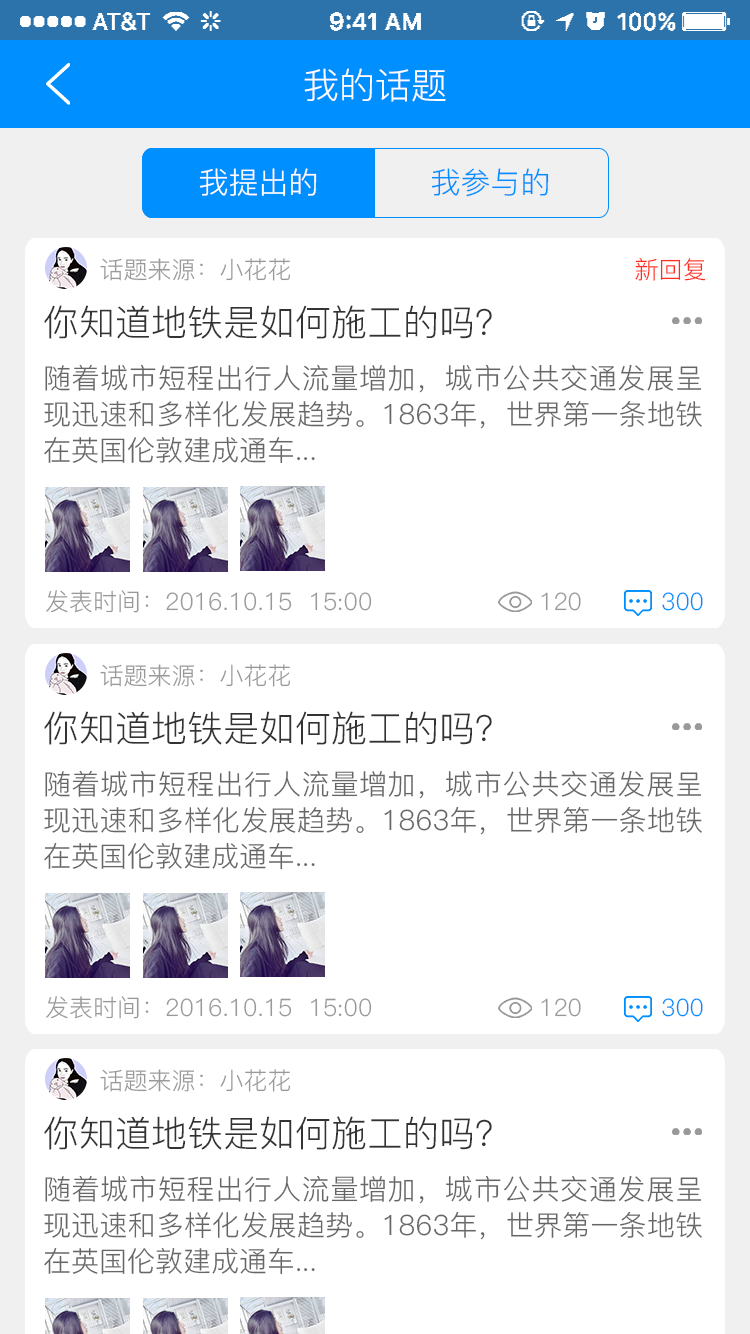
<style>
.page{position:relative;width:750px;height:1334px;background:#ffffff}
.page>*{position:absolute;margin:0}
.t1{font:36px "PingFang-SC-Regular";color:#ffffff}
.t2{font:30px "PingFang-SC-Regular";color:#ffffff}
.t3{font:30px "PingFang-SC-Regular";color:#008fff}
.t4{font:24px "PingFang-SC-Regular";color:#999999}
.t5{font:24px "PingFang-SC-Regular";color:#fe2d1d}
.t6{font:36px "PingFang-SC-Regular";color:#333333}
.t7{font:28px/36px "PingFang-SC-Regular";color:#666666}
.t8{font:24px "PingFang-SC-Regular";color:#008fff}
</style>
<div class="page">
<p class="t1" style="left:304px;top:68px;width:142px;height:34px">我的话题</p>
<p class="t2" style="left:199px;top:168px;width:118px;height:28px">我提出的</p>
<p class="t3" style="left:431px;top:168px;width:118px;height:29px">我参与的</p>
<p class="t4" style="left:100px;top:258px;width:191px;height:23px">话题来源：小花花</p>
<p class="t5" style="left:635px;top:258px;width:71px;height:23px">新回复</p>
<p class="t6" style="left:44px;top:305px;width:448px;height:34px">你知道地铁是如何施工的吗？</p>
<p class="t7" style="left:44px;top:364px;width:658px;height:100px;text-align:justify">随着城市短程出行人流量增加，城市公共交通发展呈现迅速和多样化发展趋势。1863年，世界第一条地铁在英国伦敦建成通车...</p>
<p class="t4" style="left:46px;top:590px;width:326px;height:23px">发表时间：2016.10.15  15:00</p>
<p class="t4" style="left:541px;top:592px;width:40px;height:19px">120</p>
<p class="t8" style="left:662px;top:592px;width:41px;height:19px">300</p>
<p class="t4" style="left:100px;top:664px;width:191px;height:23px">话题来源：小花花</p>
<p class="t6" style="left:44px;top:711px;width:448px;height:34px">你知道地铁是如何施工的吗？</p>
<p class="t7" style="left:44px;top:770px;width:658px;height:100px;text-align:justify">随着城市短程出行人流量增加，城市公共交通发展呈现迅速和多样化发展趋势。1863年，世界第一条地铁在英国伦敦建成通车...</p>
<p class="t4" style="left:46px;top:996px;width:326px;height:23px">发表时间：2016.10.15  15:00</p>
<p class="t4" style="left:541px;top:998px;width:40px;height:19px">120</p>
<p class="t8" style="left:662px;top:998px;width:41px;height:19px">300</p>
<p class="t4" style="left:100px;top:1069px;width:191px;height:23px">话题来源：小花花</p>
<p class="t6" style="left:44px;top:1116px;width:448px;height:34px">你知道地铁是如何施工的吗？</p>
<p class="t7" style="left:44px;top:1175px;width:658px;height:100px;text-align:justify">随着城市短程出行人流量增加，城市公共交通发展呈现迅速和多样化发展趋势。1863年，世界第一条地铁在英国伦敦建成通车...</p>
</div>
